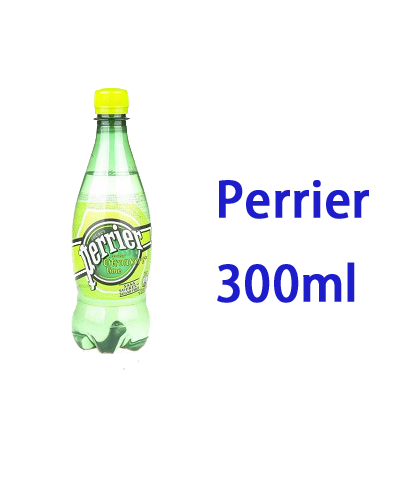
<style>
.page{position:relative;width:400px;height:500px;background:#ffffff}
.page>*{position:absolute;margin:0}
.t1{font:48px "AdobeHeitiStd-Regular";color:#1d1dcc;font-weight:bold}
</style>
<div class="page">
<p class="t1" style="left:217px;top:180px;width:152px;height:123px">Perrier<br>300ml</p>
</div>
